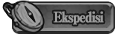
<style>
.page{position:relative;width:115px;height:34px}
.page>*{position:absolute;margin:0}
.t1{font:14px "RyuminPro-ExBold";letter-spacing:-0.08em;color:#9e9e9e;font-weight:bold;scale:0.9 1}
</style>
<div class="page">
<p class="t1" style="left:53px;top:11px;width:51px;height:14px">Ekspedisi</p>
</div>
